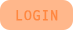
<style>
.page{position:relative;width:73px;height:30px;background:#ffb78b}
.page>*{position:absolute;margin:0}
.t1{font:14px "AndaleMono";color:#ff8840;font-weight:bold}
</style>
<div class="page">
<p class="t1" style="left:16px;top:10px;width:42px;height:11px">LOGIN</p>
</div>
